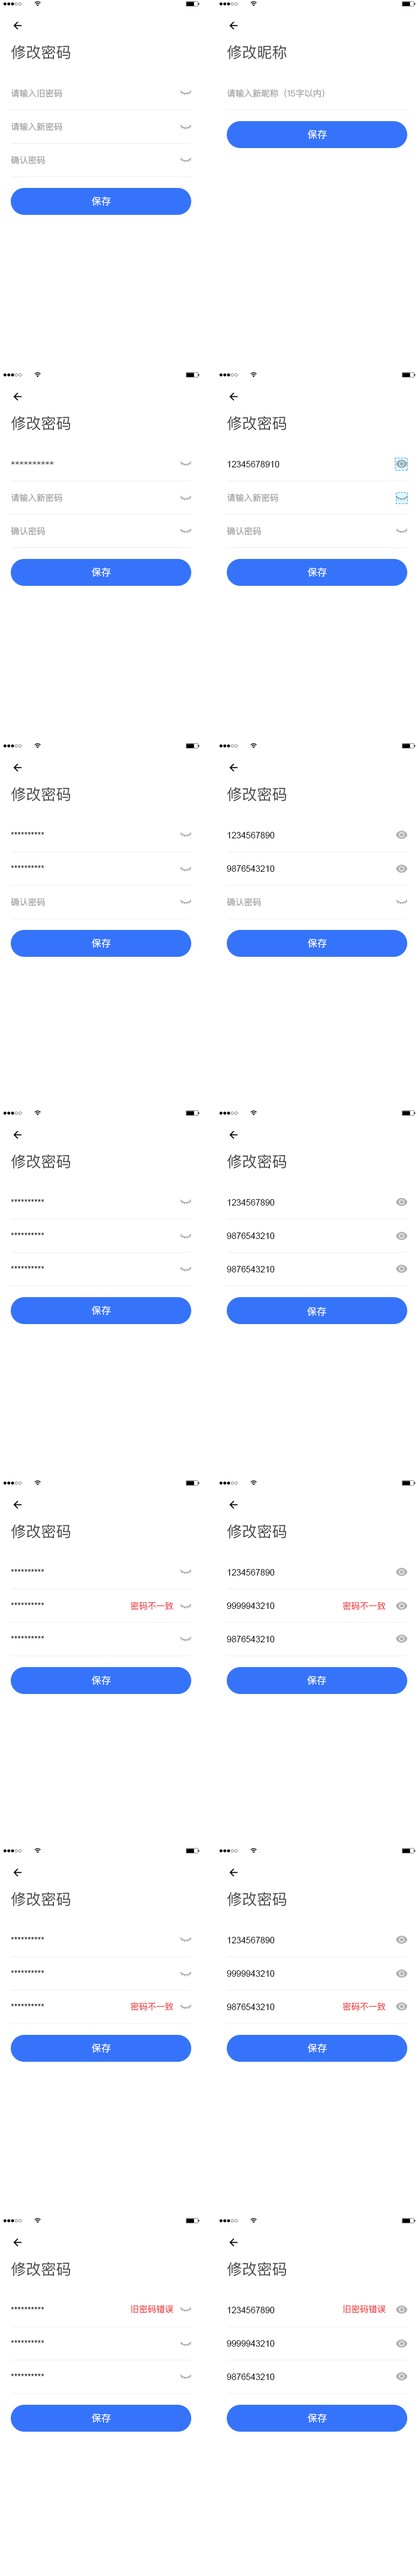
<style>
.page{position:relative;width:418px;height:2576px;background:#ffffff}
.page>*{position:absolute;margin:0}
.t1{font:15.1px "PingFangSC-Regular";color:#484848}
.t2{font:8.6px "PingFangSC-Regular";color:#999999}
.t3{font:9.7px "PingFangSC-Regular";color:#ffffff}
.t4{font:8.6px "PingFangSC-Regular";color:#1c1c1c}
.t5{font:8.6px "ArialMT";color:#000000}
.t6{font:8.6px "PingFangSC-Regular";color:#ea3a3a}
</style>
<div class="page">
<p class="t1" style="left:11px;top:45px;width:60px;height:14px">修改密码</p>
<p class="t1" style="left:227px;top:45px;width:59px;height:14px">修改昵称</p>
<p class="t2" style="left:11px;top:89px;width:51px;height:8px">请输入旧密码</p>
<p class="t2" style="left:227px;top:89px;width:97px;height:8px">请输入新昵称（15字以内）</p>
<p class="t2" style="left:11px;top:122px;width:51px;height:9px">请输入新密码</p>
<p class="t3" style="left:307px;top:130px;width:20px;height:9px">保存</p>
<p class="t2" style="left:11px;top:156px;width:34px;height:8px">确认密码</p>
<p class="t3" style="left:92px;top:197px;width:19px;height:9px">保存</p>
<p class="t1" style="left:11px;top:416px;width:60px;height:14px">修改密码</p>
<p class="t1" style="left:227px;top:416px;width:59px;height:14px">修改密码</p>
<p class="t4" style="left:11px;top:461px;width:43px;height:4px">**********</p>
<p class="t5" style="left:227px;top:461px;width:52px;height:6px">12345678910</p>
<p class="t2" style="left:11px;top:493px;width:51px;height:9px">请输入新密码</p>
<p class="t2" style="left:227px;top:493px;width:51px;height:9px">请输入新密码</p>
<p class="t2" style="left:11px;top:527px;width:34px;height:8px">确认密码</p>
<p class="t2" style="left:227px;top:527px;width:34px;height:8px">确认密码</p>
<p class="t3" style="left:92px;top:568px;width:19px;height:9px">保存</p>
<p class="t3" style="left:307px;top:568px;width:20px;height:9px">保存</p>
<p class="t1" style="left:11px;top:787px;width:60px;height:14px">修改密码</p>
<p class="t1" style="left:227px;top:787px;width:59px;height:14px">修改密码</p>
<p class="t5" style="left:11px;top:832px;width:33px;height:3px">**********</p>
<p class="t5" style="left:227px;top:832px;width:48px;height:6px">1234567890</p>
<p class="t5" style="left:11px;top:865px;width:33px;height:3px">**********</p>
<p class="t5" style="left:227px;top:865px;width:48px;height:7px">9876543210</p>
<p class="t2" style="left:11px;top:898px;width:34px;height:8px">确认密码</p>
<p class="t2" style="left:227px;top:898px;width:34px;height:8px">确认密码</p>
<p class="t3" style="left:92px;top:939px;width:19px;height:9px">保存</p>
<p class="t3" style="left:307px;top:939px;width:20px;height:9px">保存</p>
<p class="t1" style="left:11px;top:1154px;width:60px;height:14px">修改密码</p>
<p class="t1" style="left:227px;top:1154px;width:59px;height:14px">修改密码</p>
<p class="t5" style="left:11px;top:1199px;width:33px;height:3px">**********</p>
<p class="t5" style="left:227px;top:1199px;width:48px;height:7px">1234567890</p>
<p class="t5" style="left:11px;top:1233px;width:33px;height:2px">**********</p>
<p class="t5" style="left:227px;top:1233px;width:48px;height:6px">9876543210</p>
<p class="t5" style="left:11px;top:1266px;width:33px;height:3px">**********</p>
<p class="t5" style="left:227px;top:1266px;width:48px;height:6px">9876543210</p>
<p class="t3" style="left:92px;top:1306px;width:19px;height:9px">保存</p>
<p class="t3" style="left:307px;top:1307px;width:19px;height:9px">保存</p>
<p class="t1" style="left:11px;top:1524px;width:60px;height:14px">修改密码</p>
<p class="t1" style="left:227px;top:1524px;width:59px;height:14px">修改密码</p>
<p class="t5" style="left:11px;top:1569px;width:33px;height:3px">**********</p>
<p class="t5" style="left:227px;top:1569px;width:48px;height:7px">1234567890</p>
<p class="t6" style="left:130px;top:1601px;width:43px;height:9px">密码不一致</p>
<p class="t6" style="left:342px;top:1601px;width:44px;height:9px">密码不一致</p>
<p class="t5" style="left:11px;top:1602px;width:33px;height:3px">**********</p>
<p class="t5" style="left:227px;top:1602px;width:48px;height:7px">9999943210</p>
<p class="t5" style="left:11px;top:1636px;width:33px;height:3px">**********</p>
<p class="t5" style="left:227px;top:1636px;width:48px;height:6px">9876543210</p>
<p class="t3" style="left:92px;top:1676px;width:19px;height:9px">保存</p>
<p class="t3" style="left:307px;top:1676px;width:19px;height:9px">保存</p>
<p class="t1" style="left:11px;top:1892px;width:60px;height:14px">修改密码</p>
<p class="t1" style="left:227px;top:1892px;width:59px;height:14px">修改密码</p>
<p class="t5" style="left:11px;top:1937px;width:33px;height:3px">**********</p>
<p class="t5" style="left:227px;top:1937px;width:48px;height:6px">1234567890</p>
<p class="t5" style="left:11px;top:1970px;width:33px;height:3px">**********</p>
<p class="t5" style="left:227px;top:1970px;width:48px;height:7px">9999943210</p>
<p class="t5" style="left:11px;top:2004px;width:33px;height:2px">**********</p>
<p class="t6" style="left:130px;top:2002px;width:43px;height:9px">密码不一致</p>
<p class="t5" style="left:227px;top:2004px;width:48px;height:6px">9876543210</p>
<p class="t6" style="left:342px;top:2002px;width:44px;height:9px">密码不一致</p>
<p class="t3" style="left:92px;top:2043px;width:19px;height:10px">保存</p>
<p class="t3" style="left:307px;top:2043px;width:20px;height:10px">保存</p>
<p class="t1" style="left:11px;top:2262px;width:60px;height:14px">修改密码</p>
<p class="t1" style="left:227px;top:2262px;width:59px;height:14px">修改密码</p>
<p class="t5" style="left:11px;top:2307px;width:33px;height:2px">**********</p>
<p class="t6" style="left:131px;top:2305px;width:42px;height:8px">旧密码错误</p>
<p class="t5" style="left:227px;top:2307px;width:48px;height:6px">1234567890</p>
<p class="t6" style="left:344px;top:2305px;width:42px;height:8px">旧密码错误</p>
<p class="t5" style="left:11px;top:2340px;width:33px;height:3px">**********</p>
<p class="t5" style="left:227px;top:2340px;width:48px;height:7px">9999943210</p>
<p class="t5" style="left:11px;top:2374px;width:33px;height:2px">**********</p>
<p class="t5" style="left:227px;top:2374px;width:48px;height:6px">9876543210</p>
<p class="t3" style="left:92px;top:2413px;width:19px;height:10px">保存</p>
<p class="t3" style="left:307px;top:2413px;width:20px;height:10px">保存</p>
</div>
